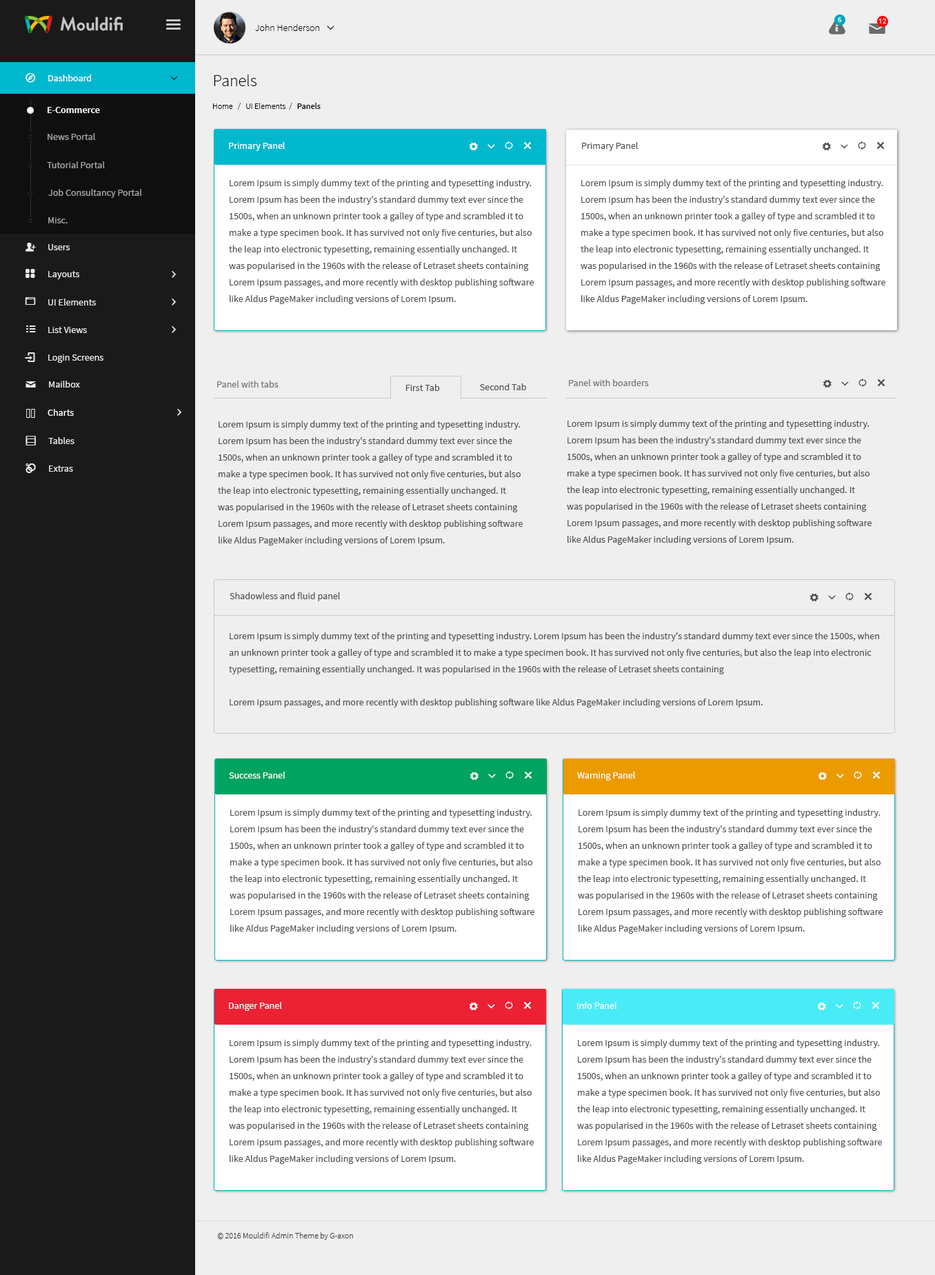
<style>
.page{position:relative;width:935px;height:1275px;background:#efefef}
.page>*{position:absolute;margin:0}
.t1{font:6.9px "OpenSans";color:#ffffff}
.t2{font:9.7px "SourceSansPro-Light";color:#000000}
.t3{font:9.7px "SourceSansPro-Regular";color:#ffffff}
.t4{font:9.7px "SourceSansPro-Regular";color:#ffffff;font-variant:small-caps}
.t5{font:16.6px "SourceSansPro-Light";color:#000000}
.t6{font:9.7px "SourceSansPro-Semibold";color:#ffffff}
.t7{font:8.3px "SourceSansPro-Light";color:#000000}
.t8{font:8.3px "SourceSansPro-Semibold";color:#000000}
.t9{font:9.7px "SourceSansPro-Regular";color:#a6a5a5}
.t10{font:9.7px "SourceSansPro-Regular";color:#fefefe}
.t11{font:9.7px "SourceSansPro-Regular";color:#505050}
.t12{font:9.4px "SourceSansPro-Regular";color:#a6a5a5}
.t13{font:9.7px/16.6px "SourceSansPro-Regular";color:#505050}
.t14{font:9.7px "SourceSansPro-Regular";color:#ebebeb}
.t15{font:9.7px "SourceSansPro-Regular";color:#707070}
.t16{font:9.4px "SourceSansPro-Regular";color:#ebebeb}
.t17{font:8.3px "SourceSansPro-Light";color:#3e3e3e}
</style>
<div class="page">
<p class="t1" style="left:838px;top:17px;width:4px;height:5px">6</p>
<p class="t2" style="left:255px;top:24px;width:64px;height:7px">John Henderson</p>
<p class="t1" style="left:879px;top:19px;width:7px;height:4px">12</p>
<p class="t3" style="left:48px;top:74px;width:43px;height:7px"><span class="t4">D</span>ashboard</p>
<p class="t5" style="left:214px;top:74px;width:43px;height:12px">Panels</p>
<p class="t6" style="left:48px;top:107px;width:52px;height:6px">E-Commerce</p>
<p class="t7" style="left:213px;top:103px;width:108px;height:7px">Home   /   UI Elements  /  <span class="t8"> Panels</span></p>
<p class="t9" style="left:48px;top:133px;width:47px;height:7px">News Portal</p>
<p class="t10" style="left:229px;top:142px;width:56px;height:9px">Primary Panel</p>
<p class="t11" style="left:582px;top:142px;width:56px;height:9px">Primary Panel</p>
<p class="t12" style="left:47px;top:161px;width:58px;height:7px">Tutorial Portal</p>
<p class="t13" style="left:229px;top:179px;width:305px;height:125px">Lorem Ipsum is simply dummy text of the printing and typesetting industry. <br>Lorem Ipsum has been the industry's standard dummy text ever since the <br>1500s, when an unknown printer took a galley of type and scrambled it to <br>make a type specimen book. It has survived not only five centuries, but also <br>the leap into electronic typesetting, remaining essentially unchanged. It <br>was popularised in the 1960s with the release of Letraset sheets containing <br>Lorem Ipsum passages, and more recently with desktop publishing software <br>like Aldus PageMaker including versions of Lorem Ipsum.</p>
<p class="t13" style="left:581px;top:179px;width:304px;height:125px">Lorem Ipsum is simply dummy text of the printing and typesetting industry. <br>Lorem Ipsum has been the industry's standard dummy text ever since the <br>1500s, when an unknown printer took a galley of type and scrambled it to <br>make a type specimen book. It has survived not only five centuries, but also <br>the leap into electronic typesetting, remaining essentially unchanged. It <br>was popularised in the 1960s with the release of Letraset sheets containing <br>Lorem Ipsum passages, and more recently with desktop publishing software <br>like Aldus PageMaker including versions of Lorem Ipsum.</p>
<p class="t12" style="left:48px;top:189px;width:94px;height:9px">Job Consultancy Portal</p>
<p class="t12" style="left:48px;top:217px;width:20px;height:6px">Misc.</p>
<p class="t14" style="left:48px;top:244px;width:22px;height:6px">Users</p>
<p class="t14" style="left:48px;top:271px;width:31px;height:8px">Layouts</p>
<p class="t14" style="left:48px;top:299px;width:48px;height:7px">UI Elements</p>
<p class="t14" style="left:48px;top:327px;width:39px;height:6px">List Views</p>
<p class="t14" style="left:48px;top:354px;width:55px;height:9px">Login Screens</p>
<p class="t14" style="left:49px;top:381px;width:31px;height:7px">Mailbox</p>
<p class="t15" style="left:217px;top:381px;width:62px;height:7px">Panel with tabs</p>
<p class="t11" style="left:406px;top:384px;width:34px;height:7px">First Tab</p>
<p class="t11" style="left:480px;top:383px;width:46px;height:7px">Second Tab</p>
<p class="t15" style="left:569px;top:379px;width:80px;height:7px">Panel with boarders</p>
<p class="t3" style="left:48px;top:409px;width:26px;height:7px">Charts</p>
<p class="t13" style="left:218px;top:421px;width:305px;height:125px">Lorem Ipsum is simply dummy text of the printing and typesetting industry. <br>Lorem Ipsum has been the industry's standard dummy text ever since the <br>1500s, when an unknown printer took a galley of type and scrambled it to <br>make a type specimen book. It has survived not only five centuries, but also <br>the leap into electronic typesetting, remaining essentially unchanged. It <br>was popularised in the 1960s with the release of Letraset sheets containing <br>Lorem Ipsum passages, and more recently with desktop publishing software <br>like Aldus PageMaker including versions of Lorem Ipsum.</p>
<p class="t13" style="left:567px;top:420px;width:305px;height:125px">Lorem Ipsum is simply dummy text of the printing and typesetting industry. <br>Lorem Ipsum has been the industry's standard dummy text ever since the <br>1500s, when an unknown printer took a galley of type and scrambled it to <br>make a type specimen book. It has survived not only five centuries, but also <br>the leap into electronic typesetting, remaining essentially unchanged. It <br>was popularised in the 1960s with the release of Letraset sheets containing <br>Lorem Ipsum passages, and more recently with desktop publishing software <br>like Aldus PageMaker including versions of Lorem Ipsum.</p>
<p class="t16" style="left:48px;top:437px;width:26px;height:7px">Tables</p>
<p class="t16" style="left:49px;top:466px;width:24px;height:6px">Extras</p>
<p class="t11" style="left:230px;top:592px;width:110px;height:9px">Shadowless and fluid panel</p>
<p class="t13" style="left:229px;top:632px;width:650px;height:76px">Lorem Ipsum is simply dummy text of the printing and typesetting industry. Lorem Ipsum has been the industry's standard dummy text ever since the 1500s, when <br>an unknown printer took a galley of type and scrambled it to make a type specimen book. It has survived not only five centuries, but also the leap into electronic <br>typesetting, remaining essentially unchanged. It was popularised in the 1960s with the release of Letraset sheets containing <br><br>Lorem Ipsum passages, and more recently with desktop publishing software like Aldus PageMaker including versions of Lorem Ipsum.</p>
<p class="t10" style="left:229px;top:772px;width:57px;height:7px">Success Panel</p>
<p class="t10" style="left:577px;top:772px;width:58px;height:9px">Warning Panel</p>
<p class="t13" style="left:230px;top:809px;width:304px;height:125px">Lorem Ipsum is simply dummy text of the printing and typesetting industry. <br>Lorem Ipsum has been the industry's standard dummy text ever since the <br>1500s, when an unknown printer took a galley of type and scrambled it to <br>make a type specimen book. It has survived not only five centuries, but also <br>the leap into electronic typesetting, remaining essentially unchanged. It <br>was popularised in the 1960s with the release of Letraset sheets containing <br>Lorem Ipsum passages, and more recently with desktop publishing software <br>like Aldus PageMaker including versions of Lorem Ipsum.</p>
<p class="t13" style="left:578px;top:809px;width:305px;height:125px">Lorem Ipsum is simply dummy text of the printing and typesetting industry. <br>Lorem Ipsum has been the industry's standard dummy text ever since the <br>1500s, when an unknown printer took a galley of type and scrambled it to <br>make a type specimen book. It has survived not only five centuries, but also <br>the leap into electronic typesetting, remaining essentially unchanged. It <br>was popularised in the 1960s with the release of Letraset sheets containing <br>Lorem Ipsum passages, and more recently with desktop publishing software <br>like Aldus PageMaker including versions of Lorem Ipsum.</p>
<p class="t10" style="left:229px;top:1002px;width:53px;height:9px">Danger Panel</p>
<p class="t10" style="left:577px;top:1002px;width:40px;height:7px">Info Panel</p>
<p class="t13" style="left:229px;top:1039px;width:305px;height:125px">Lorem Ipsum is simply dummy text of the printing and typesetting industry. <br>Lorem Ipsum has been the industry's standard dummy text ever since the <br>1500s, when an unknown printer took a galley of type and scrambled it to <br>make a type specimen book. It has survived not only five centuries, but also <br>the leap into electronic typesetting, remaining essentially unchanged. It <br>was popularised in the 1960s with the release of Letraset sheets containing <br>Lorem Ipsum passages, and more recently with desktop publishing software <br>like Aldus PageMaker including versions of Lorem Ipsum.</p>
<p class="t13" style="left:577px;top:1039px;width:305px;height:125px">Lorem Ipsum is simply dummy text of the printing and typesetting industry. <br>Lorem Ipsum has been the industry's standard dummy text ever since the <br>1500s, when an unknown printer took a galley of type and scrambled it to <br>make a type specimen book. It has survived not only five centuries, but also <br>the leap into electronic typesetting, remaining essentially unchanged. It <br>was popularised in the 1960s with the release of Letraset sheets containing <br>Lorem Ipsum passages, and more recently with desktop publishing software <br>like Aldus PageMaker including versions of Lorem Ipsum.</p>
<p class="t17" style="left:217px;top:1232px;width:136px;height:8px">© 2016 Mouldifi Admin Theme by G-axon</p>
</div>
